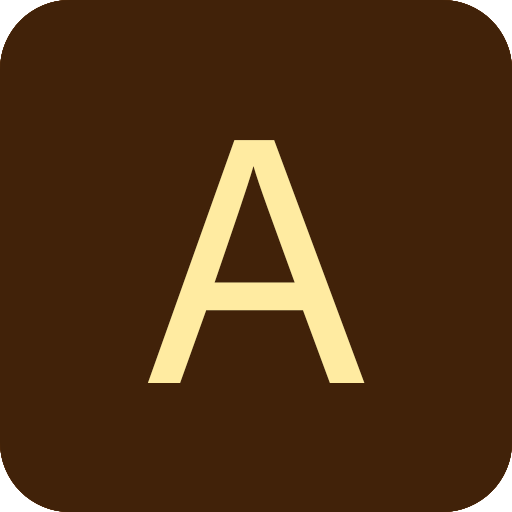
<style>
.page{position:relative;width:512px;height:512px;background:#412209}
.page>*{position:absolute;margin:0}
.t1{font:349px "AcuminConcept-Regular";color:#ffeba1}
</style>
<div class="page">
<p class="t1" style="left:147px;top:140px;width:218px;height:243px">A</p>
</div>
